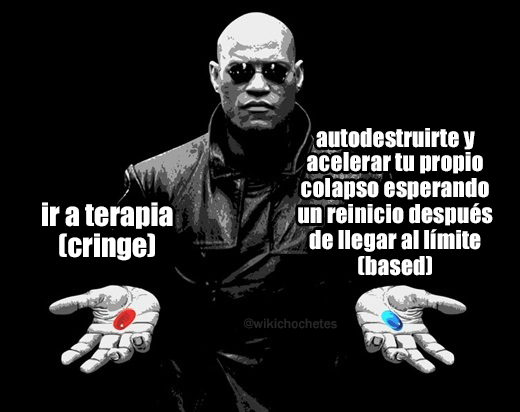
<style>
.page{position:relative;width:520px;height:412px;background:#000000}
.page>*{position:absolute;margin:0}
.t1{font:24px "Impact";color:#ffffff}
.t2{font:29.7px "Impact";color:#ffffff}
.t3{font:13.8px "FranklinGothic-Medium";color:#272727}
</style>
<div class="page">
<p class="t1" style="left:298px;top:128px;width:195px;height:148px;text-align:center">autodestruirte y<br>acelerar tu propio<br>colapso esperando<br>un reinicio después<br>de llegar al límite<br>(based)</p>
<p class="t2" style="left:42px;top:202px;width:131px;height:59px;text-align:center">ir a terapia<br>(cringe)</p>
<p class="t3" style="left:244px;top:318px;width:93px;height:11px">@wikichochetes</p>
</div>
